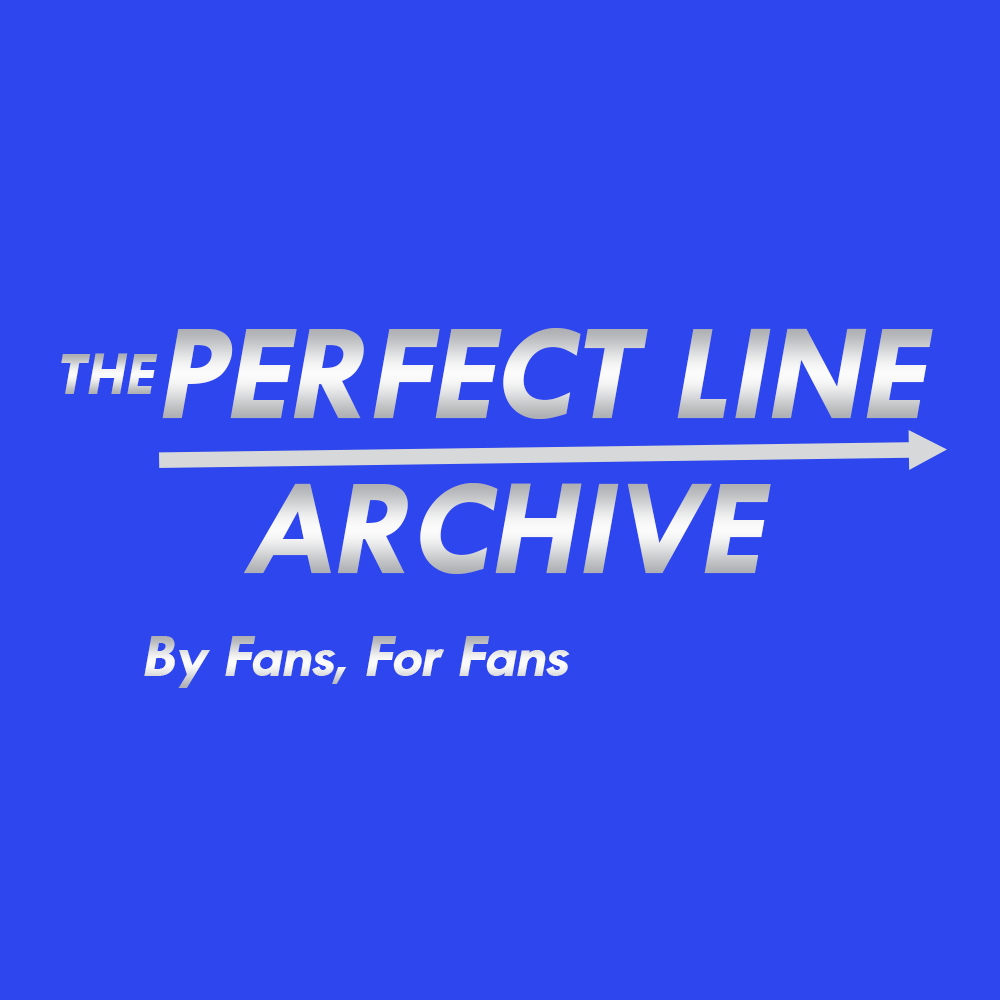
<style>
.page{position:relative;width:1000px;height:1000px;background:#2d46ed}
.page>*{position:absolute;margin:0}
.t1{font:139.2px "TwentiethCenturyforKenmoreN-Bold";letter-spacing:-0.02em;font-style:italic}
.t2{font:62.9px "TwentiethCenturyforKenmoreN-Bold";letter-spacing:-0.02em;font-style:italic}
.t3{font:62.9px "TwentiethCenturyforKenmoreN-Bold";letter-spacing:-0.02em;color:#ececed;font-style:italic}
</style>
<div class="page">
<p class="t1" style="left:162px;top:328px;width:771px;height:91px">PERFECT LINE</p>
<p class="t2" style="left:61px;top:353px;width:97px;height:41px">THE</p>
<p class="t1" style="left:243px;top:483px;width:528px;height:91px">ARCHIVE</p>
<p class="t3" style="left:144px;top:636px;width:426px;height:52px">By Fans, For Fans</p>
</div>
